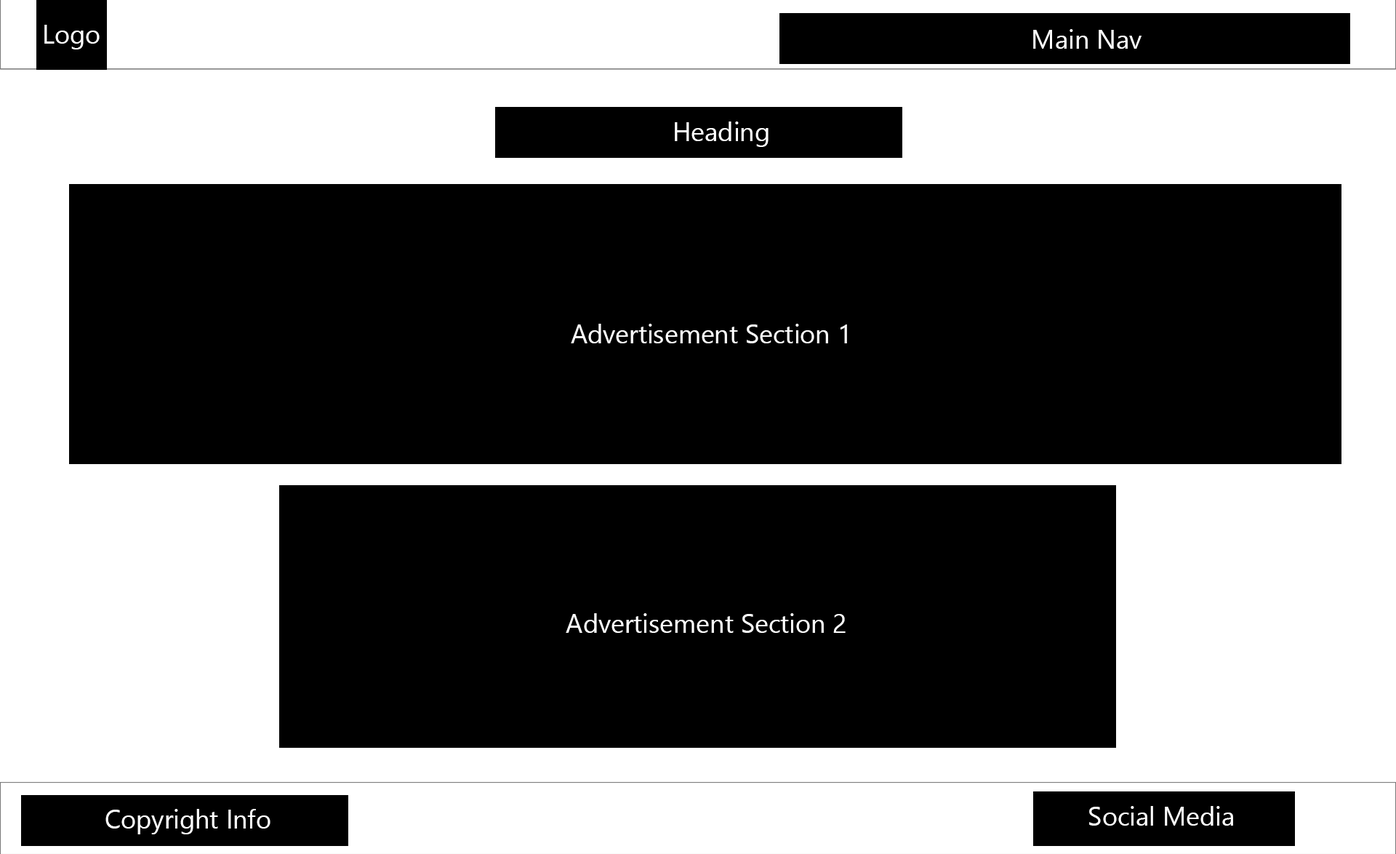
<style>
.page{position:relative;width:1396px;height:854px;background:#000000}
.page>*{position:absolute;margin:0}
.t1{font:26.2px "SegoeUI";color:#ffffff}
</style>
<div class="page">
<p class="t1" style="left:44px;top:25px;width:56px;height:24px">Logo</p>
<p class="t1" style="left:1034px;top:29px;width:108px;height:20px">Main Nav</p>
<p class="t1" style="left:675px;top:121px;width:94px;height:26px">Heading</p>
<p class="t1" style="left:571px;top:324px;width:276px;height:19px">Advertisement Section 1</p>
<p class="t1" style="left:566px;top:613px;width:280px;height:20px">Advertisement Section 2</p>
<p class="t1" style="left:105px;top:809px;width:166px;height:25px">Copyright Info</p>
<p class="t1" style="left:1090px;top:806px;width:144px;height:20px">Social Media</p>
</div>
